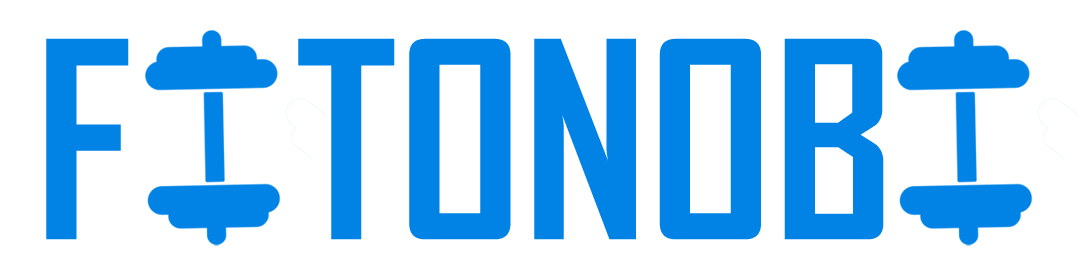
<style>
.page{position:relative;width:1080px;height:276px;background:#ffffff}
.page>*{position:absolute;margin:0}
.t1{font:262.1px "AgencyFB-Bold";color:#0183e5}
</style>
<div class="page">
<p class="t1" style="left:46px;top:38px;width:838px;height:202px">F   TONOB</p>
</div>
